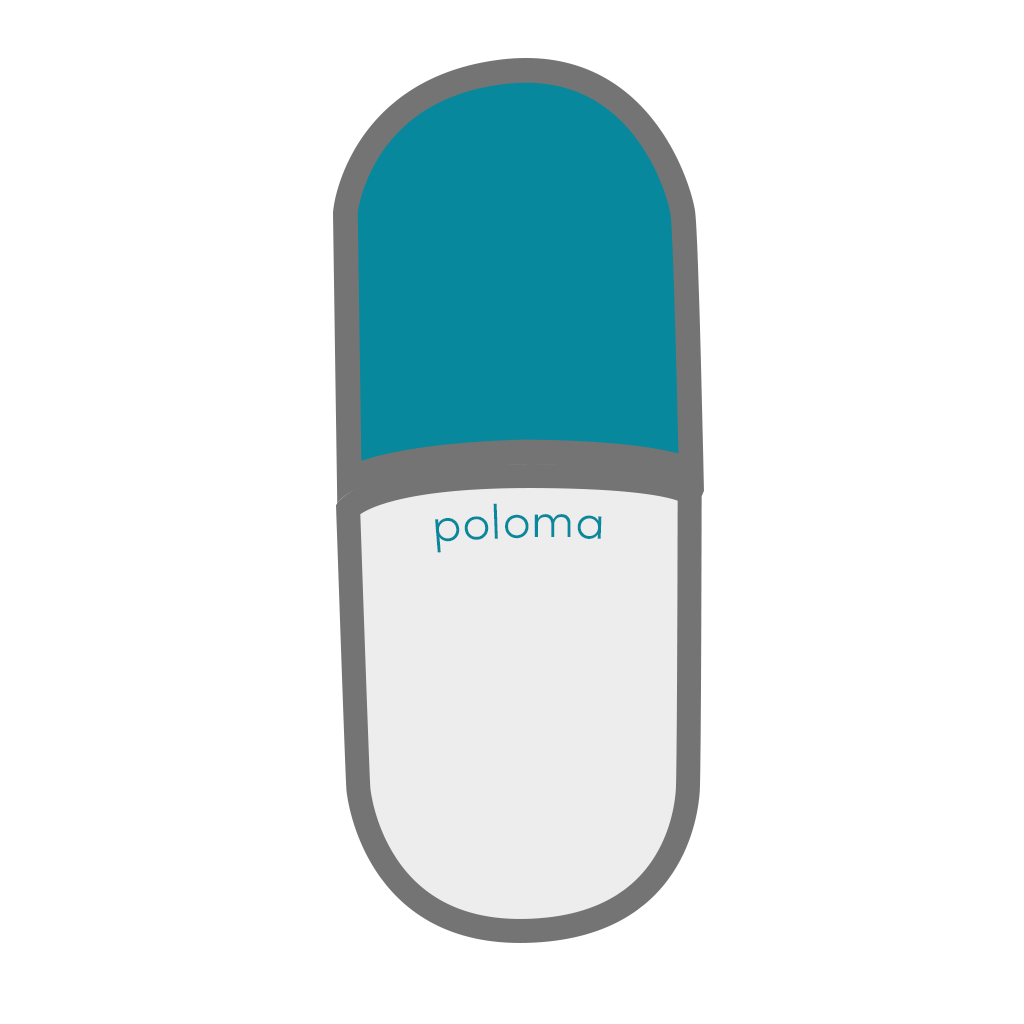
<style>
.page{position:relative;width:1024px;height:1024px;background:#ffffff}
.page>*{position:absolute;margin:0}
.t1{font:48px "LyftPro-Light";letter-spacing:0.01em;color:#07889c}
</style>
<div class="page">
<p class="t1" style="left:435px;top:503px;width:167px;height:50px">poloma</p>
</div>
